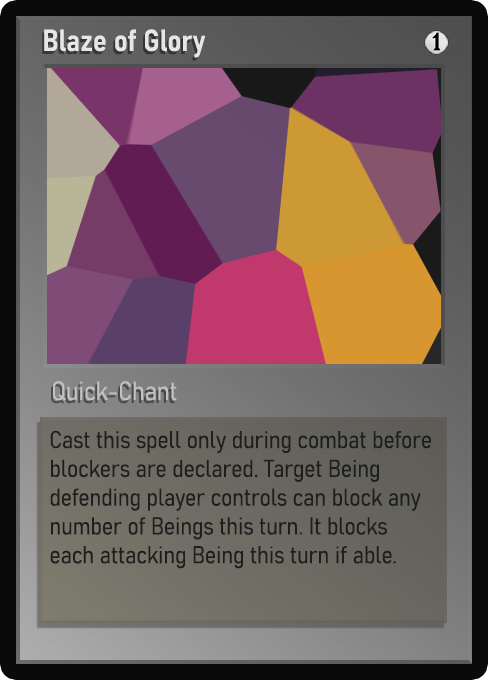
<style>
.page{position:relative;width:488px;height:680px}
.page>*{position:absolute;margin:0}
.t1{font:30px "Bahnschrift-SemiBoldSemiCondensed";color:#f2f2f2;font-weight:bold}
.t2{font:25px "WTRRoycroft";color:#000000;font-weight:bold;scale:1.09 1}
.t3{font:26px "Bahnschrift-LightSemiCondensed";color:#c8c8c8;font-weight:bold}
.t4{font:24px "Bahnschrift-LightSemiCondensed";color:#1e1e1e;font-weight:bold}
</style>
<div class="page">
<p class="t1" style="left:44px;top:29px;width:162px;height:29px;opacity:0.9">Blaze of Glory</p>
<p class="t2" style="left:432px;top:32px;width:9px;height:19px">1</p>
<p class="t3" style="left:53px;top:381px;width:124px;height:20px;opacity:0.9">Quick-Chant</p>
<p class="t4" style="left:50px;top:430px;width:381px;height:139px">Cast this spell only during combat before blockers are declared. Target Being defending player controls can block any number of Beings this turn. It blocks each attacking Being this turn if able.</p>
</div>
